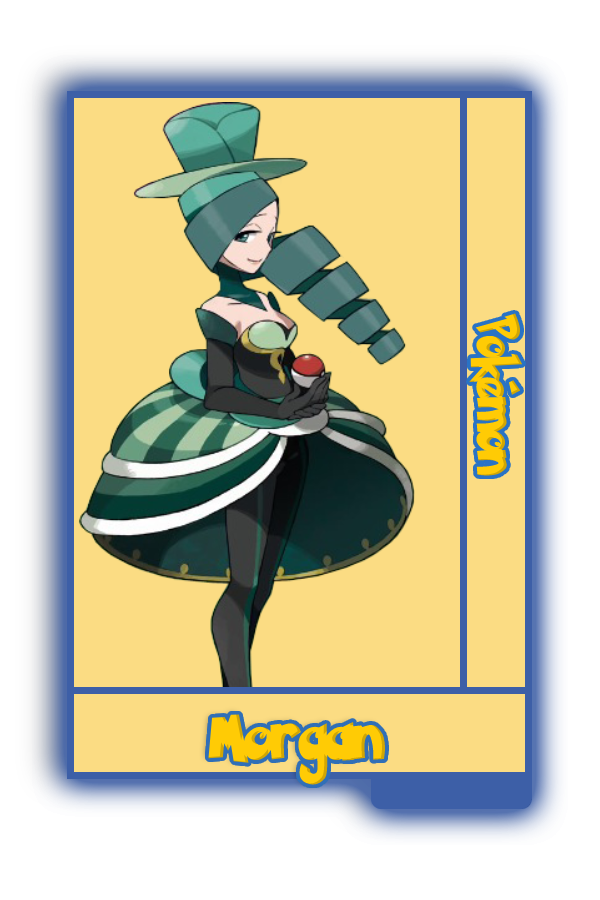
<style>
.page{position:relative;width:600px;height:900px;background:#fbdc83}
.page>*{position:absolute;margin:0}
.t1{font:48.8px "PokemonSolidNormal";color:#ffcb05;scale:0.8 1}
.t2{font:56.6px "PokemonSolidNormal";color:#ffcb05;scale:0.92 1}
</style>
<div class="page">
<p class="t1" style="left:469px;top:313px;width:54px;height:163px;rotate:90deg">Pokémon</p>
<p class="t2" style="left:208px;top:714px;width:178px;height:71px">Morgan</p>
</div>
